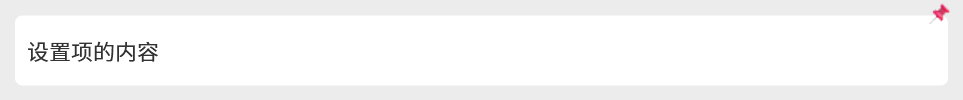
<style>
.page{position:relative;width:963px;height:100px;background:#ffffff}
.page>*{position:absolute;margin:0}
.t1{font:21.7px "SourceHanSansSC-Regular";color:#333333}
</style>
<div class="page">
<p class="t1" style="left:28px;top:41px;width:130px;height:21px">设置项的内容</p>
</div>
